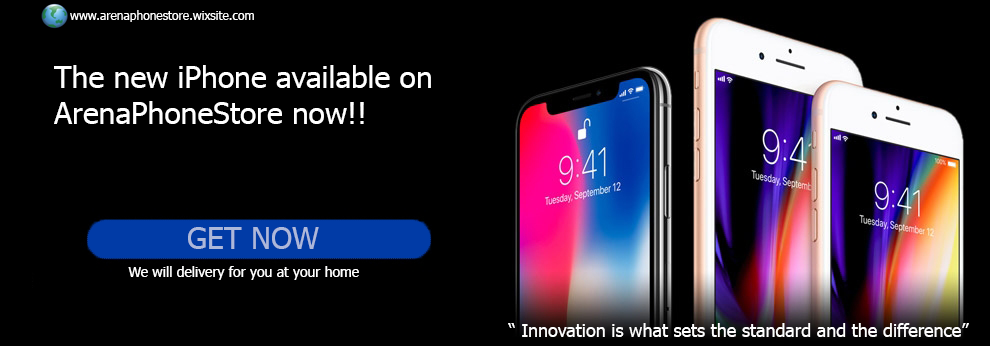
<style>
.page{position:relative;width:990px;height:346px;background:#000000}
.page>*{position:absolute;margin:0}
.t1{font:12px "Tahoma";color:#ffffff}
.t2{font:30px "Tahoma";color:#ffffff}
.t3{font:30px "Tahoma";color:#adb8da}
.t4{font:14px "Tahoma";color:#ffffff}
.t5{font:18px "Tahoma";color:#ffffff}
</style>
<div class="page">
<p class="t1" style="left:70px;top:10px;width:184px;height:12px">www.arenaphonestore.wixsite.com</p>
<p class="t2" style="left:54px;top:65px;width:377px;height:59px">The new iPhone available on ArenaPhoneStore now!!</p>
<p class="t3" style="left:188px;top:227px;width:131px;height:22px">GET NOW</p>
<p class="t4" style="left:128px;top:266px;width:231px;height:14px">We will delivery for you at your home</p>
<p class="t5" style="left:508px;top:323px;width:461px;height:14px">“ Innovation is what sets the standard and the difference”</p>
</div>
